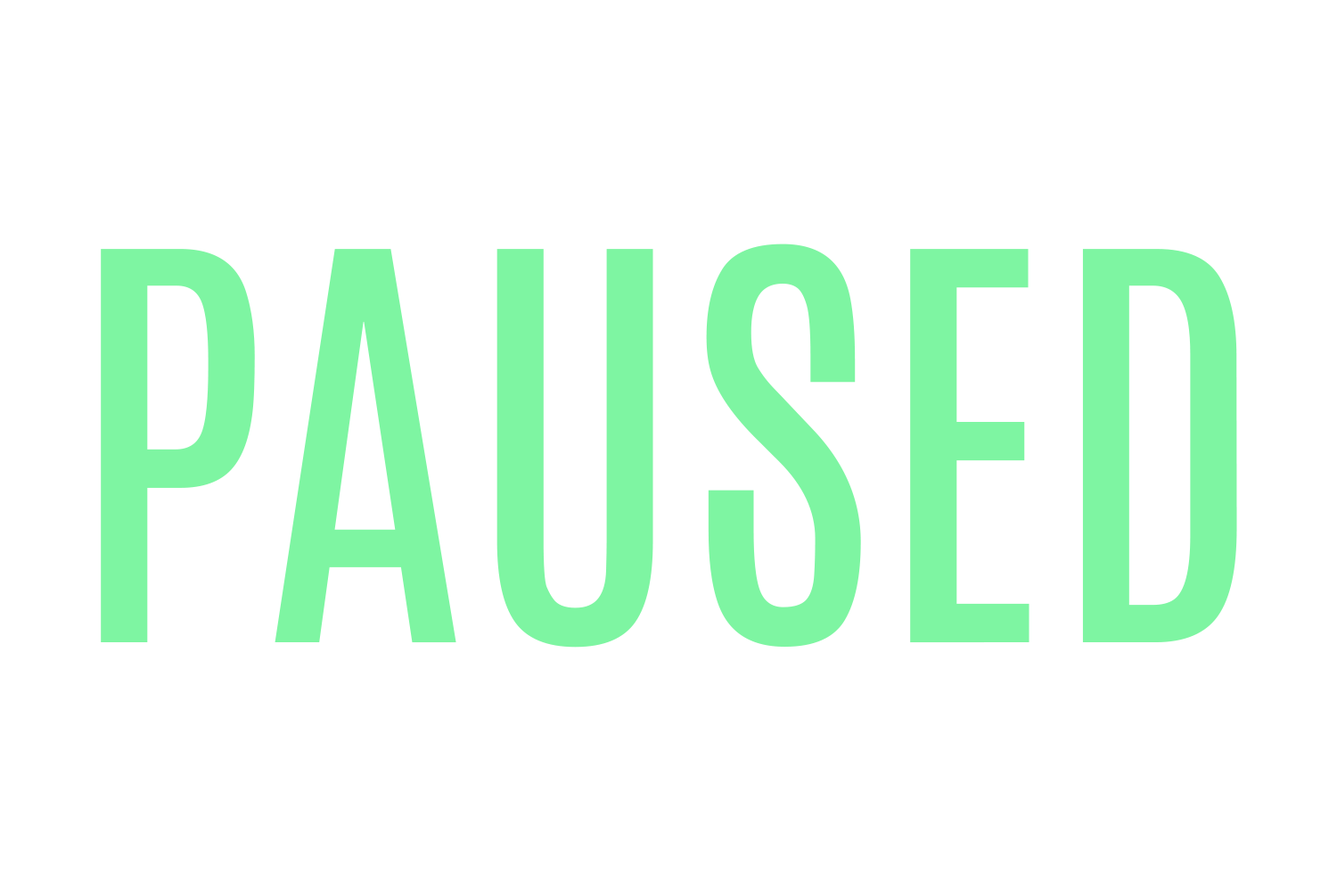
<style>
.page{position:relative;width:1337px;height:892px;background:#ffffff}
.page>*{position:absolute;margin:0}
.t1{font:457.6px "Antonio-Regular";color:#7ef5a2}
</style>
<div class="page">
<p class="t1" style="left:101px;top:243px;width:1137px;height:404px">PAUSED</p>
</div>
